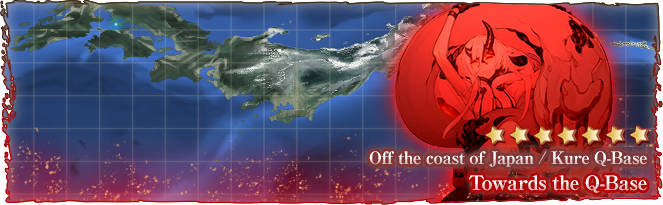
<style>
.page{position:relative;width:663px;height:205px}
.page>*{position:absolute;margin:0}
.t1{font:17px "RyuminPro-ExBold";letter-spacing:-0.04em}
.t2{font:20px "RyuminPro-ExBold";letter-spacing:-0.04em}
</style>
<div class="page">
<p class="t1" style="left:369px;top:151px;width:278px;height:16px">Off the coast of Japan / Kure Q-Base</p>
<p class="t2" style="left:469px;top:175px;width:178px;height:18px">Towards the Q-Base</p>
</div>
